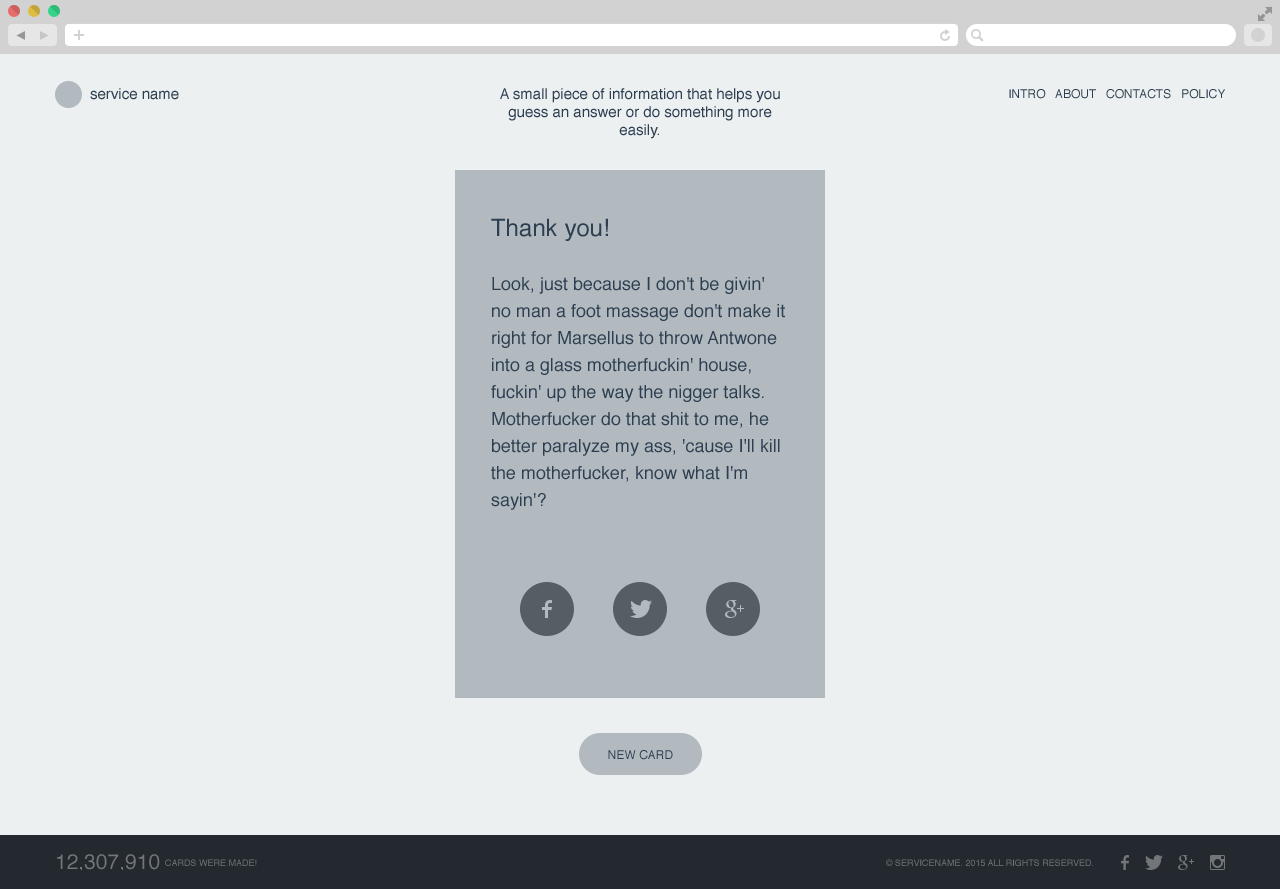
<style>
.page{position:relative;width:1280px;height:889px;background:#ecf0f1}
.page>*{position:absolute;margin:0}
.t1{font:15px "Helvetica";color:#2c3e50}
.t2{font:15px/18px "Helvetica";color:#2c3e50}
.t3{font:12px "Helvetica";color:#2c3e50;text-transform:uppercase}
.t4{font:18px/27px "Helvetica";color:#2c3e50}
.t5{font:24px/27px "Helvetica";color:#2c3e50}
.t6{font:9px "Helvetica";color:#727679;text-transform:uppercase}
.t7{font:21px "Helvetica";color:#727679;text-transform:uppercase}
</style>
<div class="page">
<p class="t1" style="left:90px;top:88px;width:89px;height:12px">service name</p>
<p class="t2" style="left:500px;top:88px;width:280px;height:51px;text-align:center">A small piece of information that helps you guess an answer or do something more easily.</p>
<p class="t3" style="left:1009px;top:89px;width:216px;height:10px">intro   about   contacts   Policy</p>
<p class="t4" style="left:491px;top:218px;width:294px;height:292px"><span class="t5">Thank you!<br></span><br>Look, just because I don't be givin' no man a foot massage don't make it right for Marsellus to throw Antwone into a glass motherfuckin' house, fuckin' up the way the nigger talks. Motherfucker do that shit to me, he better paralyze my ass, 'cause I'll kill the motherfucker, know what I'm sayin'?</p>
<p class="t3" style="left:608px;top:750px;width:65px;height:10px">new card</p>
<p class="t6" style="left:57px;top:854px;width:200px;height:16px"><span class="t7">12,307,910  </span>cards were made!</p>
<p class="t6" style="left:886px;top:859px;width:207px;height:7px">© servicename. 2015 All rights reserved.</p>
</div>
